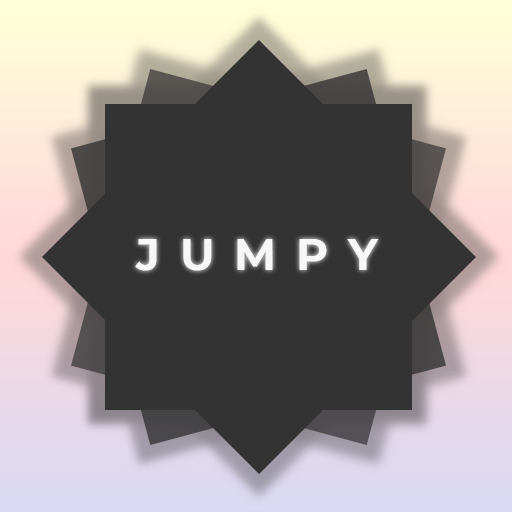
<style>
.page{position:relative;width:512px;height:512px;background:#333333}
.page>*{position:absolute;margin:0}
.t1{font:44px "Montserrat-Bold";letter-spacing:0.45em;color:#ffffff}
</style>
<div class="page">
<p class="t1" style="left:135px;top:239px;width:244px;height:32px;opacity:0.95">JUMPY</p>
</div>
